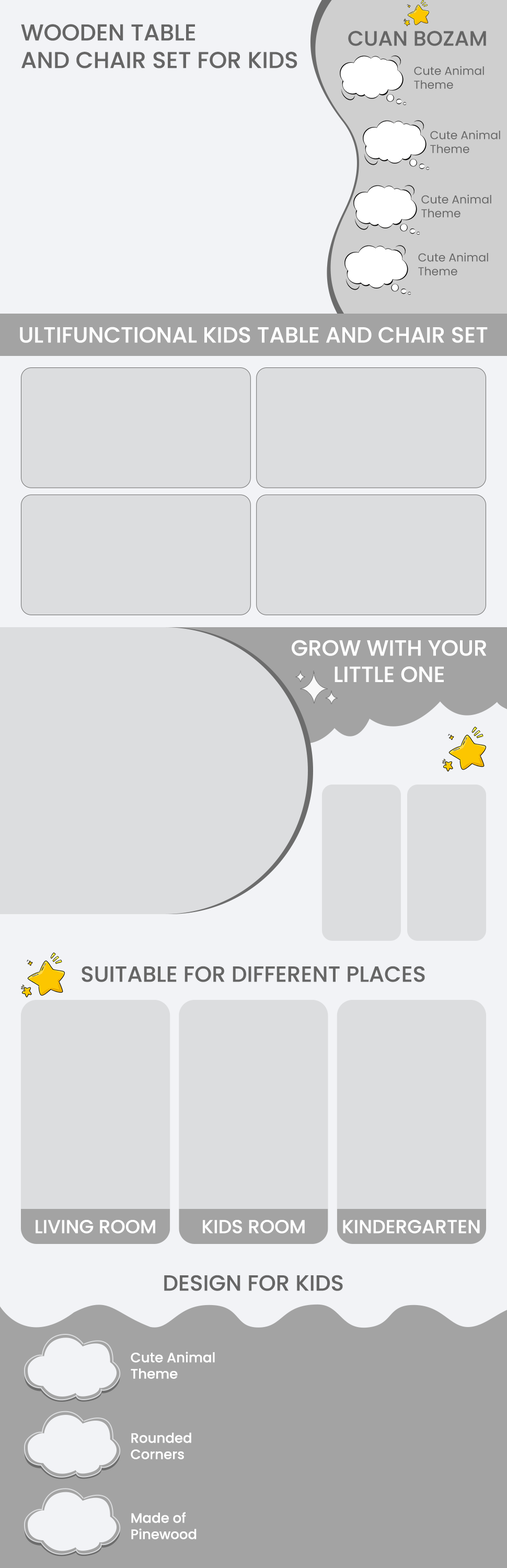
<style>
.page{position:relative;width:507px;height:1568px;background:#dcdddf}
.page>*{position:absolute;margin:0}
.t1{font:23px "Poppins-Medium";color:#666666}
.t2{font:20.9px "Poppins-Medium";color:#666666}
.t3{font:11.5px "Poppins-Regular";color:#666666}
.t4{font:22px "Poppins-Medium";color:#ffffff}
.t5{font:22px "Poppins-Medium";color:#666666}
.t6{font:18.8px "Poppins-Medium";color:#ffffff}
.t7{font:13.6px "Poppins-Medium";color:#ffffff}
</style>
<div class="page">
<p class="t1" style="left:21px;top:24px;width:276px;height:44px">WOODEN TABLE<br>AND CHAIR SET FOR KIDS</p>
<p class="t2" style="left:348px;top:31px;width:138px;height:15px">CUAN BOZAM</p>
<p class="t3" style="left:414px;top:66px;width:70px;height:23px">Cute Animal <br>Theme</p>
<p class="t3" style="left:430px;top:130px;width:70px;height:23px">Cute Animal <br>Theme</p>
<p class="t3" style="left:421px;top:194px;width:70px;height:23px">Cute Animal <br>Theme</p>
<p class="t3" style="left:418px;top:252px;width:70px;height:23px">Cute Animal <br>Theme</p>
<p class="t4" style="left:20px;top:327px;width:468px;height:16px">ULTIFUNCTIONAL KIDS TABLE AND CHAIR SET</p>
<p class="t4" style="left:292px;top:640px;width:195px;height:43px;text-align:center">GROW WITH YOUR<br>LITTLE ONE</p>
<p class="t5" style="left:82px;top:966px;width:343px;height:16px">SUITABLE FOR DIFFERENT PLACES</p>
<p class="t6" style="left:36px;top:1220px;width:119px;height:13px">LIVING ROOM</p>
<p class="t6" style="left:203px;top:1220px;width:102px;height:13px">KIDS ROOM</p>
<p class="t6" style="left:343px;top:1220px;width:137px;height:13px">KINDERGARTEN</p>
<p class="t5" style="left:164px;top:1275px;width:179px;height:16px">DESIGN FOR KIDS</p>
<p class="t7" style="left:131px;top:1352px;width:84px;height:27px">Cute Animal<br>Theme</p>
<p class="t7" style="left:131px;top:1433px;width:60px;height:26px">Rounded <br>Corners</p>
<p class="t7" style="left:131px;top:1512px;width:66px;height:27px">Made of<br>Pinewood</p>
</div>
